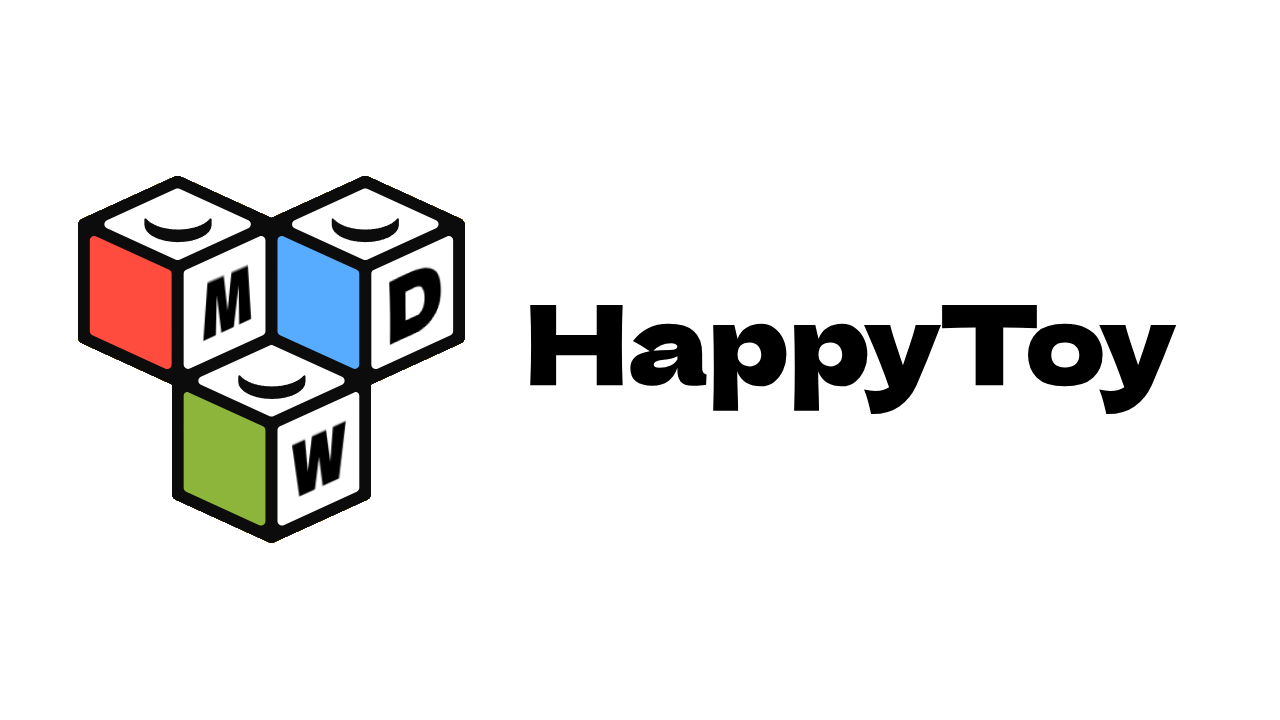
<style>
.page{position:relative;width:1280px;height:720px;background:#ffffff}
.page>*{position:absolute;margin:0}
.t1{font:110.3px "DelaGothicOne-Regular";color:#000000}
</style>
<div class="page">
<p class="t1" style="left:530px;top:305px;width:647px;height:110px">HappyToy</p>
</div>
